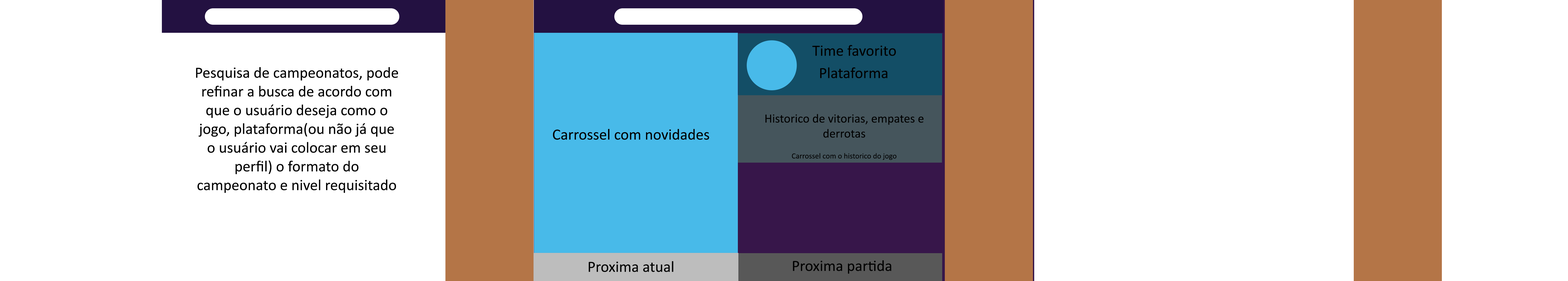
<style>
.page{position:relative;width:1568px;height:281px;background:#ffffff}
.page>*{position:absolute;margin:0}
.t1{font:15.6px "Calibri";color:#000000}
.t2{font:12.5px "Calibri";color:#000000}
.t3{font:7.8px "Calibri";color:#000000}
</style>
<div class="page">
<p class="t1" style="left:812px;top:45px;width:84px;height:11px">Time favorito</p>
<p class="t1" style="left:196px;top:67px;width:202px;height:126px;text-align:center">Pesquisa de campeonatos, pode refinar a busca de acordo com que o usuário deseja como o jogo, plataforma(ou não já que o usuário vai colocar em seu perfil) o formato do campeonato e nivel requisitado</p>
<p class="t1" style="left:820px;top:67px;width:67px;height:11px">Plataforma</p>
<p class="t2" style="left:765px;top:114px;width:159px;height:24px;text-align:center">Historico de vitorias, empates e derrotas</p>
<p class="t1" style="left:553px;top:129px;width:156px;height:11px">Carrossel com novidades</p>
<p class="t3" style="left:792px;top:153px;width:105px;height:7px">Carrossel com o historico do jogo</p>
<p class="t1" style="left:589px;top:261px;width:84px;height:12px">Proxima atual</p>
<p class="t1" style="left:793px;top:261px;width:98px;height:13px">Proxima partida</p>
</div>
